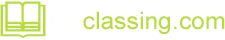
<style>
.page{position:relative;width:225px;height:40px;background:#ffffff}
.page>*{position:absolute;margin:0}
.t1{font:24px "ArialMT";color:#b8db40;scale:1.03 1}
.t2{font:24px "ArialMT";color:#fefefc;scale:1.03 1}
</style>
<div class="page">
<p class="t1" style="left:50px;top:11px;width:175px;height:23px"><span class="t2">Go</span>classing.com</p>
</div>
